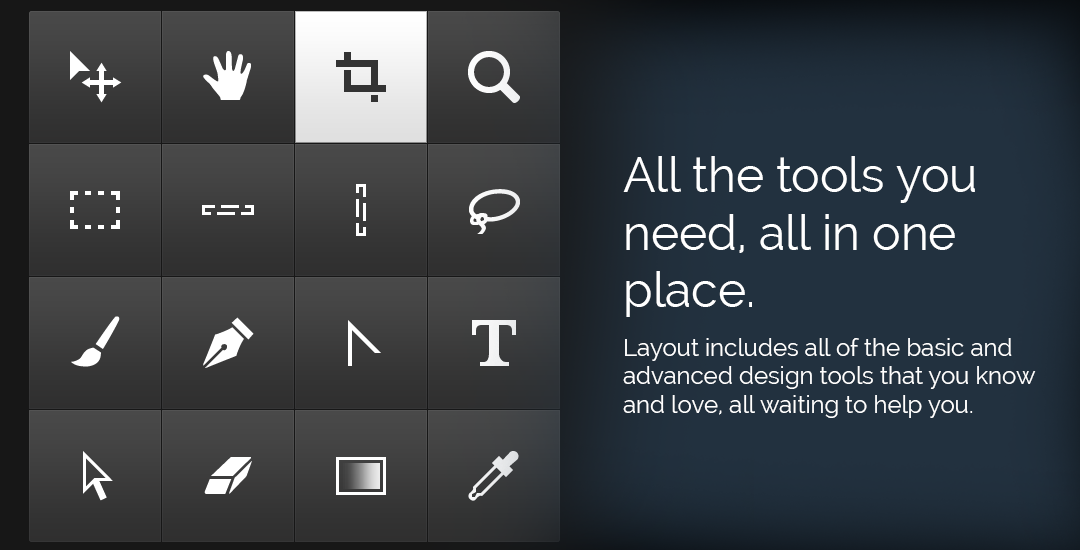
<style>
.page{position:relative;width:1080px;height:550px}
.page>*{position:absolute;margin:0}
.t1{font:48px "Raleway";color:#ffffff}
.t2{font:24px "Raleway";color:#ffffff}
</style>
<div class="page">
<p class="t1" style="left:623px;top:156px;width:352px;height:161px">All the tools you need, all in one place.</p>
<p class="t2" style="left:623px;top:338px;width:413px;height:80px">Layout includes all of the basic and advanced design tools that you know and love, all waiting to help you.</p>
</div>
